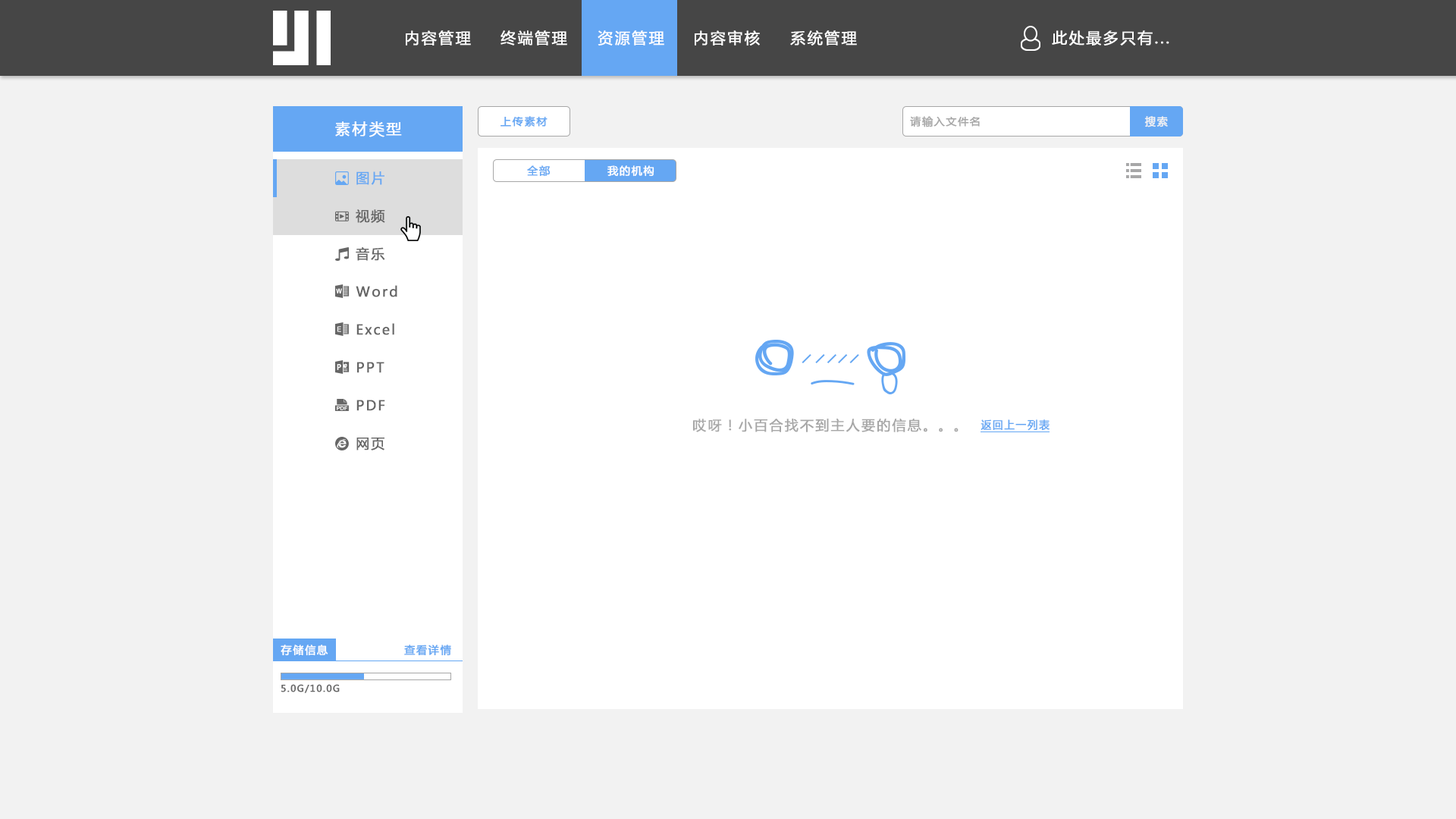
<style>
.page{position:relative;width:1456px;height:819px;background:#f2f2f2}
.page>*{position:absolute;margin:0}
.t1{font:15.2px "MicrosoftYaHei";letter-spacing:0.1em;color:#ffffff;font-weight:bold}
.t2{font:10.6px "MicrosoftYaHei";letter-spacing:0.1em;color:#65a7f3;font-weight:bold}
.t3{font:10.6px "MicrosoftYaHei";letter-spacing:0.1em;color:#a7a7a7;font-weight:bold}
.t4{font:10.6px "MicrosoftYaHei";letter-spacing:0.1em;color:#f2f2f2;font-weight:bold}
.t5{font:13.6px "MicrosoftYaHei";letter-spacing:0.1em;color:#65a7f3;font-weight:bold}
.t6{font:10.6px "MicrosoftYaHei";letter-spacing:0.1em;color:#ffffff;font-weight:bold}
.t7{font:13.6px "MicrosoftYaHei";letter-spacing:0.1em;color:#666666;font-weight:bold}
.t8{font:13.6px "MicrosoftYaHei";letter-spacing:0.1em;color:#a7a7a7;font-weight:bold}
.t9{font:9px "MicrosoftYaHei";letter-spacing:0.1em;color:#666666;font-weight:bold}
</style>
<div class="page">
<p class="t1" style="left:406px;top:30px;width:65px;height:15px">内容管理</p>
<p class="t1" style="left:500px;top:30px;width:67px;height:15px">终端管理</p>
<p class="t1" style="left:598px;top:30px;width:66px;height:15px">资源管理</p>
<p class="t1" style="left:695px;top:30px;width:65px;height:15px">内容审核</p>
<p class="t1" style="left:790px;top:30px;width:67px;height:15px">系统管理</p>
<p class="t1" style="left:1052px;top:30px;width:117px;height:15px">此处最多只有...</p>
<p class="t1" style="left:335px;top:121px;width:67px;height:16px">素材类型</p>
<p class="t2" style="left:500px;top:116px;width:48px;height:11px">上传素材</p>
<p class="t3" style="left:910px;top:116px;width:70px;height:11px">请输入文件名</p>
<p class="t4" style="left:1144px;top:116px;width:24px;height:11px">搜索</p>
<p class="t5" style="left:356px;top:171px;width:28px;height:14px">图片</p>
<p class="t2" style="left:527px;top:165px;width:24px;height:12px">全部</p>
<p class="t6" style="left:607px;top:165px;width:47px;height:12px">我的机构</p>
<p class="t7" style="left:356px;top:209px;width:29px;height:14px">视频</p>
<p class="t7" style="left:356px;top:247px;width:29px;height:14px">音乐</p>
<p class="t7" style="left:356px;top:285px;width:41px;height:12px">Word</p>
<p class="t7" style="left:356px;top:323px;width:38px;height:12px">Excel</p>
<p class="t7" style="left:357px;top:362px;width:27px;height:11px">PPT</p>
<p class="t7" style="left:356px;top:400px;width:29px;height:11px">PDF</p>
<p class="t8" style="left:693px;top:419px;width:266px;height:13px">哎呀！小百合找不到主人要的信息。。。</p>
<p class="t2" style="left:981px;top:419px;width:69px;height:12px">返回上一列表</p>
<p class="t7" style="left:356px;top:438px;width:28px;height:12px">网页</p>
<p class="t6" style="left:281px;top:645px;width:47px;height:11px">存储信息</p>
<p class="t2" style="left:404px;top:645px;width:47px;height:11px">查看详情</p>
<p class="t9" style="left:281px;top:684px;width:59px;height:9px">5.0G/10.0G</p>
</div>
